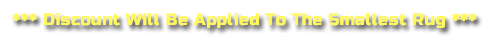
<style>
.page{position:relative;width:489px;height:38px;background:#ffffff}
.page>*{position:absolute;margin:0}
.t1{font:16.7px "RussoOne-Regular";letter-spacing:0.025em;color:#fff95e}
</style>
<div class="page">
<p class="t1" style="left:12px;top:13px;width:465px;height:15px">*** Discount Will Be Applied To The Smallest Rug ***</p>
</div>
